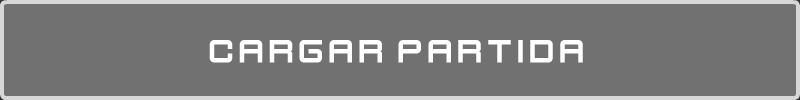
<style>
.page{position:relative;width:800px;height:100px;background:#717171}
.page>*{position:absolute;margin:0}
.t1{font:36px "KenVector-Future";color:#ffffff}
</style>
<div class="page">
<p class="t1" style="left:209px;top:40px;width:374px;height:23px">cargar partida</p>
</div>
